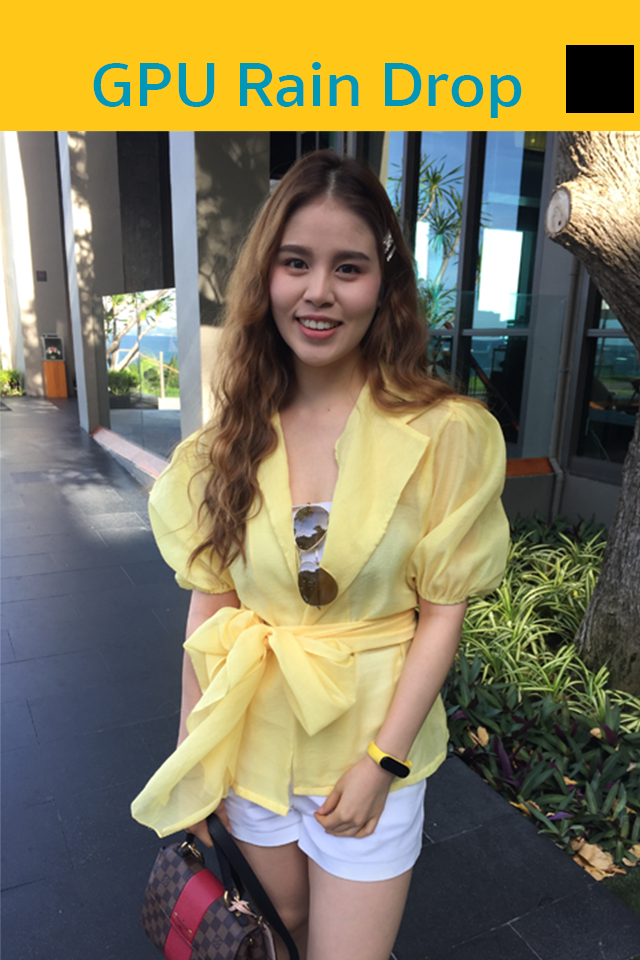
<style>
.page{position:relative;width:640px;height:960px}
.page>*{position:absolute;margin:0}
.t1{font:63.9px "SukhumvitSet-SemiBold";color:#0097b8;scale:1.05 1}
</style>
<div class="page">
<p class="t1" style="left:93px;top:62px;width:429px;height:56px">GPU Rain Drop</p>
</div>
